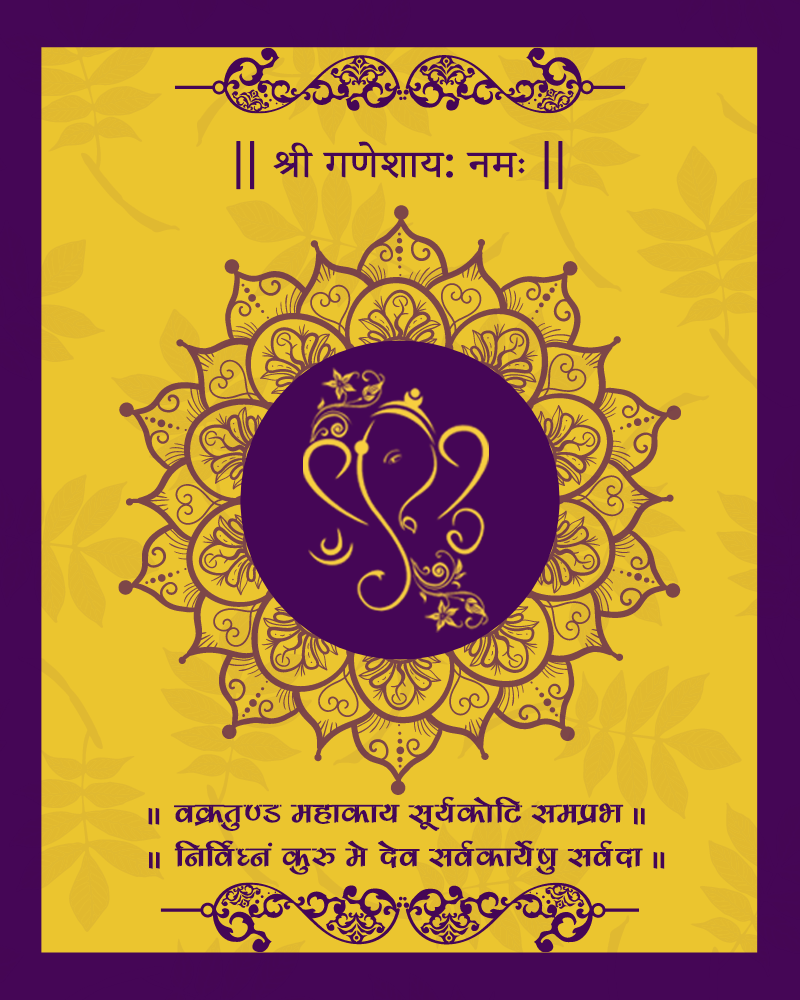
<style>
.page{position:relative;width:800px;height:1000px;background:#ebc52f}
.page>*{position:absolute;margin:0}
.t1{font:47.4px "AdobeDevanagari-Regular";color:#450656;font-weight:bold;scale:1.09 1}
.t2{font:47.4px "MyriadPro-Regular";color:#450656;font-weight:bold;scale:1.09 1}
.t3{font:33.3px/43.8px "KrutiDev180";color:#450656;font-weight:bold;scale:1.09 1}
.t4{font:22.2px/28.8px "YatraOne-Regular";letter-spacing:0.02em;color:#450555;font-weight:bold;scale:1.09 1}
</style>
<div class="page">
<p class="t1" style="left:236px;top:141px;width:327px;height:49px"><span class="t2">|| </span>श्री गणेशाय<span class="t2">: </span>नमः<span class="t2"> ||</span></p>
<p class="t3" style="left:148px;top:796px;width:517px;height:79px;text-align:center"><span class="t4">ll  </span>oØrq.M egkdk; lw;ZdksfV leçHk <span class="t4">ll <br>ll  </span>fufoZ?ua dq# es nso loZdk;Zs"kq loZnk <span class="t4">ll</span></p>
</div>
